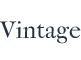
<style>
.page{position:relative;width:81px;height:60px;background:#ffffff}
.page>*{position:absolute;margin:0}
.t1{font:24px "IM_FELL_French_Canon_Roman";color:#233141}
</style>
<div class="page">
<p class="t1" style="left:0px;top:21px;width:81px;height:23px">Vintage</p>
</div>
